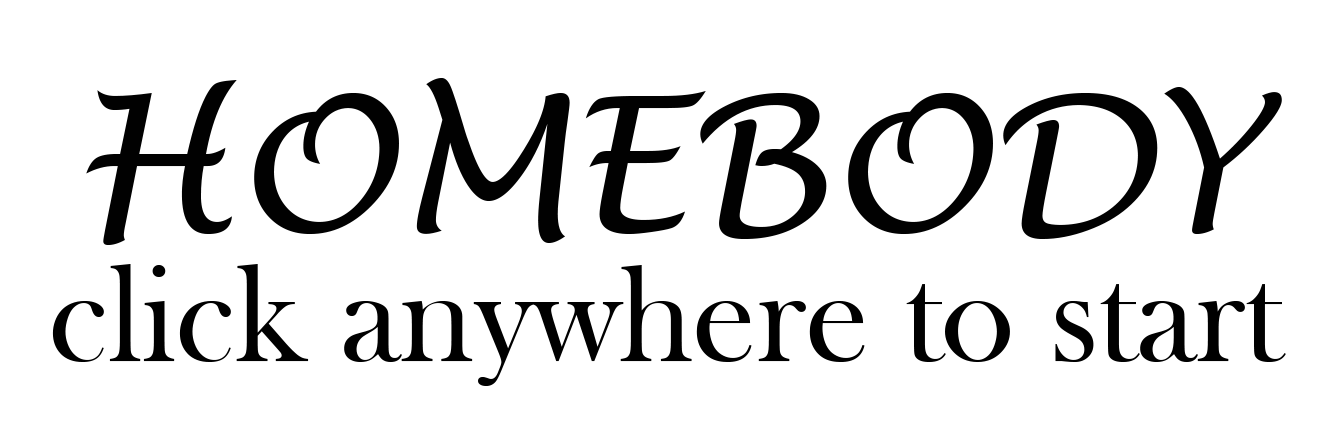
<style>
.page{position:relative;width:1341px;height:439px;background:#ffffff}
.page>*{position:absolute;margin:0}
.t1{font:187px "LucidaHandwriting-Italic";color:#010101}
.t2{font:141px "BaskOldFace";color:#000000}
</style>
<div class="page">
<p class="t1" style="left:86px;top:78px;width:1196px;height:167px">HOMEBODY</p>
<p class="t2" style="left:52px;top:264px;width:1234px;height:122px">click anywhere to start</p>
</div>
